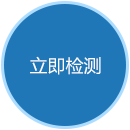
<style>
.page{position:relative;width:130px;height:130px;background:#1f77b8}
.page>*{position:absolute;margin:0}
.t1{font:18px "MicrosoftYaHei";color:#ffffff}
</style>
<div class="page">
<p class="t1" style="left:30px;top:56px;width:71px;height:19px">立即检测</p>
</div>
